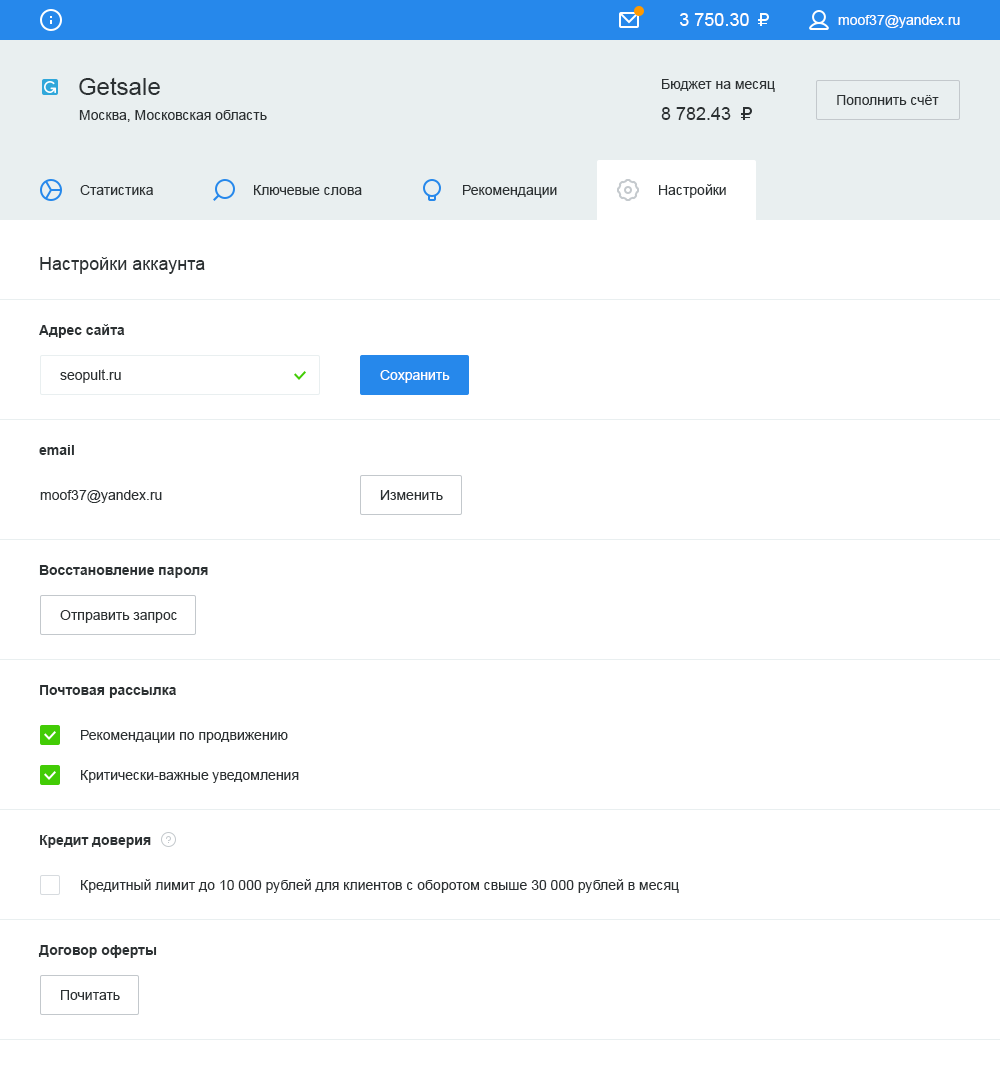
<style>
.page{position:relative;width:1000px;height:1080px;background:#ffffff}
.page>*{position:absolute;margin:0}
.t1{font:18px "ArialMT";color:#ffffff}
.t2{font:14px "ArialMT";color:#ffffff}
.t3{font:24px "ArialMT";color:#2c3133}
.t4{font:14px "ArialMT";color:#2c3133}
.t5{font:18px "ArialMT";color:#2c3133}
.t6{font:14px "Arial-BoldMT";color:#2c3133}
.t7{font:14px/40px "ArialMT";color:#2c3133}
</style>
<div class="page">
<p class="t1" style="left:680px;top:13px;width:69px;height:13px">3 750.30</p>
<p class="t2" style="left:838px;top:15px;width:122px;height:13px">moof37@yandex.ru</p>
<p class="t3" style="left:79px;top:77px;width:81px;height:18px">Getsale</p>
<p class="t4" style="left:662px;top:79px;width:113px;height:13px">Бюджет на месяц</p>
<p class="t4" style="left:837px;top:95px;width:102px;height:10px">Пополнить счёт</p>
<p class="t4" style="left:79px;top:110px;width:188px;height:12px">Москва, Московская область</p>
<p class="t5" style="left:661px;top:107px;width:70px;height:13px">8 782.43</p>
<p class="t4" style="left:80px;top:185px;width:73px;height:10px">Статистика</p>
<p class="t4" style="left:254px;top:185px;width:108px;height:10px">Ключевые слова</p>
<p class="t4" style="left:463px;top:185px;width:94px;height:13px">Рекомендации</p>
<p class="t4" style="left:659px;top:184px;width:67px;height:14px">Настройки</p>
<p class="t5" style="left:40px;top:257px;width:165px;height:17px">Настройки аккаунта</p>
<p class="t6" style="left:39px;top:324px;width:86px;height:14px">Адрес сайта</p>
<p class="t4" style="left:60px;top:369px;width:61px;height:14px">seopult.ru</p>
<p class="t2" style="left:380px;top:370px;width:70px;height:13px">Сохранить</p>
<p class="t6" style="left:39px;top:445px;width:35px;height:10px">email</p>
<p class="t4" style="left:40px;top:490px;width:122px;height:13px">moof37@yandex.ru</p>
<p class="t4" style="left:380px;top:490px;width:63px;height:10px">Изменить</p>
<p class="t6" style="left:39px;top:565px;width:169px;height:13px">Восстановление пароля</p>
<p class="t4" style="left:60px;top:610px;width:117px;height:13px">Отправить запрос</p>
<p class="t6" style="left:40px;top:685px;width:136px;height:13px">Почтовая рассылка</p>
<p class="t7" style="left:81px;top:730px;width:218px;height:53px">Рекомендации по продвижению<br>Критически-важные уведомления</p>
<p class="t6" style="left:40px;top:835px;width:111px;height:13px">Кредит доверия</p>
<p class="t4" style="left:81px;top:879px;width:598px;height:14px">Кредитный лимит до 10 000 рублей для клиентов с оборотом свыше 30 000 рублей в месяц</p>
<p class="t6" style="left:38px;top:945px;width:119px;height:13px">Договор оферты</p>
<p class="t4" style="left:61px;top:990px;width:59px;height:10px">Почитать</p>
</div>
